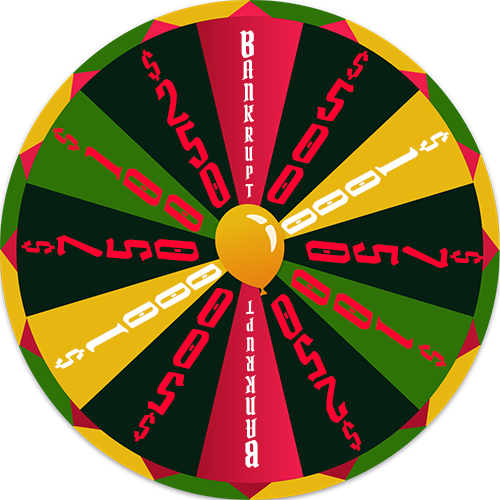
<style>
.page{position:relative;width:500px;height:500px;background:#051f13}
.page>*{position:absolute;margin:0}
.t1{font:36px "PirataOne-Regular";color:#ffffff}
.t2{font:36.1px "PirataOne-Regular";color:#ff0031}
.t3{font:25.3px "PirataOne-Regular";color:#ffffff}
.t4{font:58.9px "PirataOne-Regular";color:#ff0031}
.t5{font:23.4px "PirataOne-Regular";color:#ffffff}
.t6{font:22.9px "PirataOne-Regular";color:#ffffff}
.t7{font:20.1px "PirataOne-Regular";color:#ffffff}
.t8{font:36.1px "PirataOne-Regular";color:#ffffff}
.t9{font:19px "PirataOne-Regular";color:#ffffff}
.t10{font:58.9px "PirataOne-Regular";color:#ffffff}
.t11{font:17.5px "PirataOne-Regular";color:#ffffff}
.t12{font:47px "PirataOne-Regular";color:#ffffff}
.t13{font:16.8px "PirataOne-Regular";color:#ffffff}
</style>
<div class="page">
<p class="t1" style="left:240px;top:30px;width:14px;height:28px">B</p>
<p class="t2" style="left:141px;top:49px;width:20px;height:32px;rotate:-22deg">$</p>
<p class="t2" style="left:347px;top:51px;width:21px;height:29px;rotate:35deg">$</p>
<p class="t3" style="left:242px;top:59px;width:12px;height:21px">A</p>
<p class="t4" style="left:317px;top:78px;width:37px;height:44px;rotate:35deg">5</p>
<p class="t4" style="left:155px;top:79px;width:34px;height:48px;rotate:-23deg">2</p>
<p class="t5" style="left:243px;top:83px;width:11px;height:19px">N</p>
<p class="t6" style="left:243px;top:104px;width:11px;height:19px">K</p>
<p class="t4" style="left:175px;top:120px;width:34px;height:49px;rotate:-23deg">5</p>
<p class="t7" style="left:244px;top:126px;width:10px;height:17px">R</p>
<p class="t4" style="left:292px;top:123px;width:37px;height:41px;rotate:35deg">0</p>
<p class="t2" style="left:52px;top:127px;width:28px;height:24px;rotate:-47deg">$</p>
<p class="t8" style="left:419px;top:131px;width:30px;height:21px;rotate:63deg">$</p>
<p class="t4" style="left:85px;top:146px;width:37px;height:35px;rotate:-52deg">1</p>
<p class="t9" style="left:244px;top:146px;width:9px;height:15px">U</p>
<p class="t10" style="left:375px;top:147px;width:43px;height:29px;rotate:62deg">1</p>
<p class="t4" style="left:123px;top:168px;width:40px;height:38px;rotate:-52deg">0</p>
<p class="t4" style="left:199px;top:162px;width:32px;height:46px;rotate:-23deg">0</p>
<p class="t11" style="left:245px;top:165px;width:8px;height:15px">P</p>
<p class="t4" style="left:267px;top:164px;width:37px;height:41px;rotate:35deg">0</p>
<p class="t12" style="left:344px;top:170px;width:37px;height:27px;rotate:62deg">0</p>
<p class="t13" style="left:245px;top:183px;width:9px;height:15px">T</p>
<p class="t4" style="left:164px;top:194px;width:40px;height:38px;rotate:-52deg">0</p>
<p class="t12" style="left:312px;top:189px;width:37px;height:27px;rotate:62deg">0</p>
<p class="t12" style="left:281px;top:208px;width:36px;height:27px;rotate:62deg">0</p>
<p class="t2" style="left:21px;top:240px;width:34px;height:15px;rotate:-84deg">$</p>
<p class="t4" style="left:56px;top:235px;width:47px;height:22px;rotate:-85deg">7</p>
<p class="t4" style="left:106px;top:238px;width:47px;height:23px;rotate:-85deg">5</p>
<p class="t4" style="left:154px;top:239px;width:45px;height:23px;rotate:-85deg">0</p>
<p class="t4" style="left:306px;top:240px;width:45px;height:24px;rotate:96deg">0</p>
<p class="t4" style="left:352px;top:242px;width:47px;height:24px;rotate:96deg">5</p>
<p class="t4" style="left:402px;top:246px;width:47px;height:22px;rotate:96deg">7</p>
<p class="t2" style="left:450px;top:250px;width:34px;height:14px;rotate:96deg">$</p>
<p class="t12" style="left:186px;top:263px;width:36px;height:28px;rotate:-119deg">0</p>
<p class="t4" style="left:291px;top:269px;width:40px;height:37px;rotate:125deg">0</p>
<p class="t12" style="left:155px;top:282px;width:36px;height:28px;rotate:-119deg">0</p>
<p class="t4" style="left:197px;top:288px;width:36px;height:40px;rotate:-146deg">0</p>
<p class="t4" style="left:270px;top:294px;width:33px;height:46px;rotate:156deg">0</p>
<p class="t4" style="left:333px;top:293px;width:40px;height:37px;rotate:125deg">0</p>
<p class="t12" style="left:123px;top:301px;width:36px;height:28px;rotate:-119deg">0</p>
<p class="t13" style="left:246px;top:300px;width:8px;height:15px;rotate:-180deg">T</p>
<p class="t11" style="left:246px;top:317px;width:8px;height:15px;rotate:-180deg">P</p>
<p class="t4" style="left:375px;top:316px;width:38px;height:33px;rotate:125deg">1</p>
<p class="t10" style="left:86px;top:323px;width:43px;height:30px;rotate:-119deg">1</p>
<p class="t4" style="left:173px;top:329px;width:36px;height:40px;rotate:-146deg">0</p>
<p class="t9" style="left:246px;top:337px;width:9px;height:15px;rotate:-180deg">U</p>
<p class="t4" style="left:293px;top:333px;width:34px;height:49px;rotate:156deg">5</p>
<p class="t8" style="left:54px;top:348px;width:31px;height:21px;rotate:-118deg">$</p>
<p class="t2" style="left:418px;top:344px;width:28px;height:23px;rotate:130deg">$</p>
<p class="t7" style="left:245px;top:355px;width:10px;height:17px;rotate:-180deg">R</p>
<p class="t4" style="left:148px;top:372px;width:36px;height:44px;rotate:-146deg">5</p>
<p class="t6" style="left:245px;top:375px;width:11px;height:19px;rotate:-180deg">K</p>
<p class="t4" style="left:314px;top:375px;width:34px;height:48px;rotate:156deg">2</p>
<p class="t5" style="left:245px;top:396px;width:11px;height:19px;rotate:-180deg">N</p>
<p class="t2" style="left:134px;top:412px;width:21px;height:30px;rotate:-145deg">$</p>
<p class="t3" style="left:245px;top:418px;width:12px;height:21px;rotate:-180deg">A</p>
<p class="t2" style="left:342px;top:420px;width:19px;height:31px;rotate:157deg">$</p>
<p class="t1" style="left:245px;top:440px;width:14px;height:28px;rotate:-180deg">B</p>
</div>
